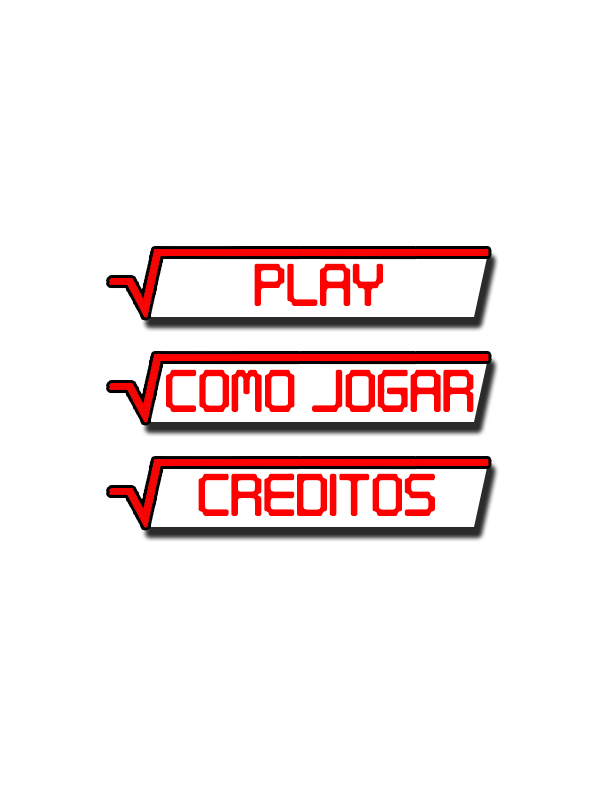
<style>
.page{position:relative;width:600px;height:800px;background:#ffffff}
.page>*{position:absolute;margin:0}
.t1{font:60px "Digitaltech";color:#ff0000}
</style>
<div class="page">
<p class="t1" style="left:254px;top:260px;width:129px;height:43px">Play</p>
<p class="t1" style="left:254px;top:263px;width:129px;height:43px">Play</p>
<p class="t1" style="left:166px;top:369px;width:308px;height:43px">COMO JOGAR</p>
<p class="t1" style="left:198px;top:473px;width:237px;height:43px">creditos</p>
</div>
